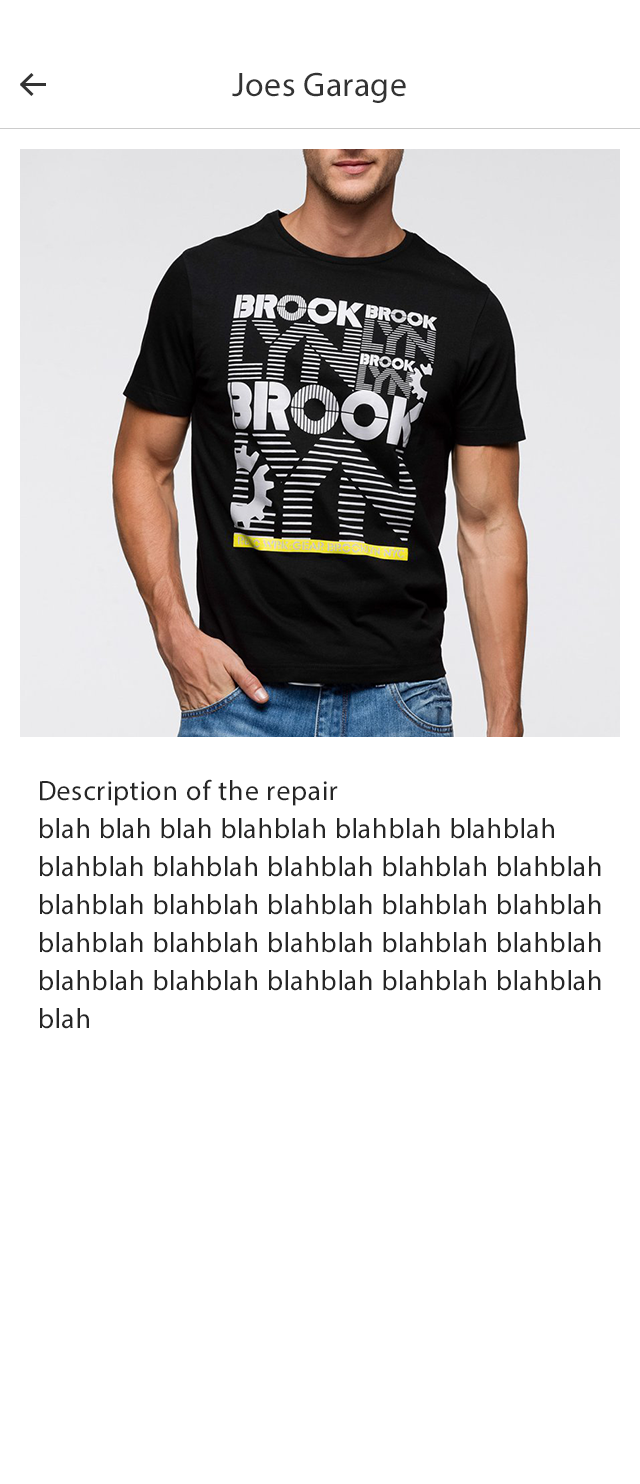
<style>
.page{position:relative;width:640px;height:1484px;background:#ffffff}
.page>*{position:absolute;margin:0}
.t1{font:34px "MyriadPro-Regular";letter-spacing:0.01em;color:#333333}
.t2{font:28px/38px "MyriadPro-Regular";letter-spacing:0.025em;color:#262626}
</style>
<div class="page">
<p class="t1" style="left:232px;top:72px;width:174px;height:31px">Joes Garage</p>
<p class="t2" style="left:40px;top:779px;width:561px;height:250px">Description of the repair<br>blah blah blah blahblah blahblah blahblah blahblah blahblah blahblah blahblah blahblah blahblah blahblah blahblah blahblah blahblah blahblah blahblah blahblah blahblah blahblah blahblah blahblah blahblah blahblah blahblah blah</p>
</div>
